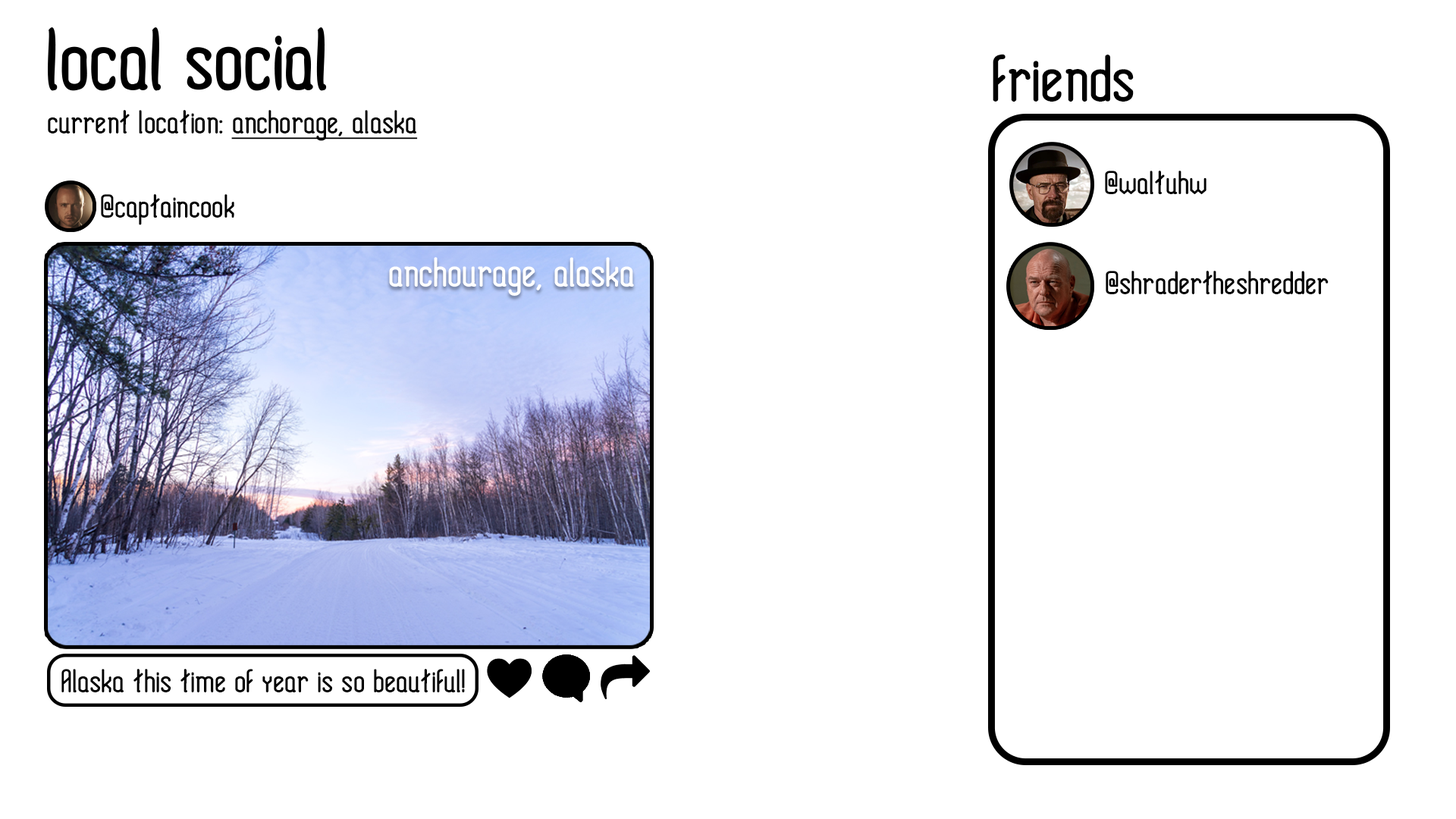
<style>
.page{position:relative;width:1456px;height:819px;background:#ffffff}
.page>*{position:absolute;margin:0}
.t1{font:60.9px "HolySans";color:#000000;scale:1.06 1}
.t2{font:30.2px "HolySans";color:#000000;scale:1.06 1}
.t3{font:30.2px "HolySans";color:#000000;text-decoration:underline;scale:1.06 1}
.t4{font:37.7px "HolySans";color:#ffffff;scale:1.06 1}
</style>
<div class="page">
<p class="t1" style="left:993px;top:54px;width:141px;height:48px">friends</p>
<p class="t2" style="left:48px;top:110px;width:370px;height:31px">current location: <span class="t3">anchorage, alaska</span></p>
<p class="t2" style="left:1105px;top:171px;width:101px;height:23px">@waltuhw</p>
<p class="t2" style="left:101px;top:194px;width:133px;height:31px">@captaincook</p>
<p class="t4" style="left:389px;top:257px;width:245px;height:39px">anchourage, alaska</p>
<p class="t2" style="left:1106px;top:271px;width:223px;height:23px">@shradertheshredder</p>
<p class="t2" style="left:61px;top:669px;width:404px;height:23px">Alaska this time of year is so beautiful!</p>
</div>
